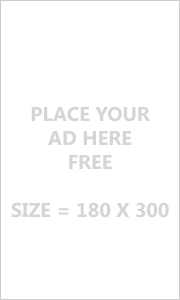
<style>
.page{position:relative;width:180px;height:300px;background:#ffffff}
.page>*{position:absolute;margin:0}
.t1{font:20px "SegoeUI-Bold";color:#d5d5d5}
</style>
<div class="page">
<p class="t1" style="left:11px;top:106px;width:158px;height:112px;text-align:center">PLACE YOUR<br>AD HERE<br>FREE<br><br>SIZE = 180 X 300</p>
</div>
